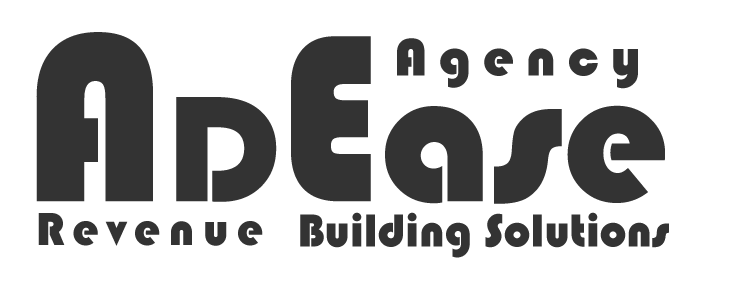
<style>
.page{position:relative;width:735px;height:288px;background:#ffffff}
.page>*{position:absolute;margin:0}
.t1{font:191.5px "Bauhaus93";color:#333333}
.t2{font:247.3px "Bauhaus93";color:#333333;scale:0.97 1}
.t3{font:155.9px "Bauhaus93";color:#333333}
.t4{font:247.3px "Bauhaus93";color:#333333;scale:0.84 1}
.t5{font:54.5px "Bauhaus93";letter-spacing:0.2em;color:#333333;scale:1.04 1}
.t6{font:48px "Bauhaus93";letter-spacing:0.17em;color:#333333}
.t7{font:48px "Bauhaus93";color:#333333}
</style>
<div class="page">
<p class="t1" style="left:36px;top:32px;width:629px;height:172px"><span class="t2">A</span><span class="t3">D</span><span class="t4">E</span>ase</p>
<p class="t5" style="left:397px;top:38px;width:241px;height:51px">Agency</p>
<p class="t6" style="left:38px;top:213px;width:225px;height:33px">Revenue</p>
<p class="t7" style="left:300px;top:212px;width:369px;height:46px">Building Solutions</p>
</div>
